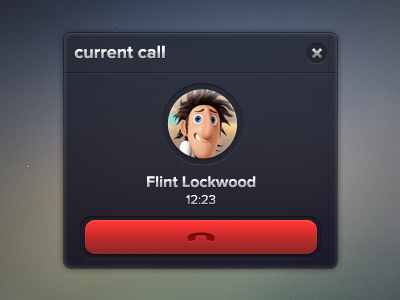
<style>
.page{position:relative;width:400px;height:300px}
.page>*{position:absolute;margin:0}
.t1{font:18px "ProximaNova-Bold"}
.t2{font:16px "ProximaNova-Bold"}
.t3{font:13px "ProximaNova-Regular"}
</style>
<div class="page">
<p class="t1" style="left:74px;top:45px;width:91px;height:14px">current call</p>
<p class="t2" style="left:147px;top:176px;width:109px;height:12px">Flint Lockwood</p>
<p class="t3" style="left:186px;top:195px;width:30px;height:9px">12:23</p>
</div>
